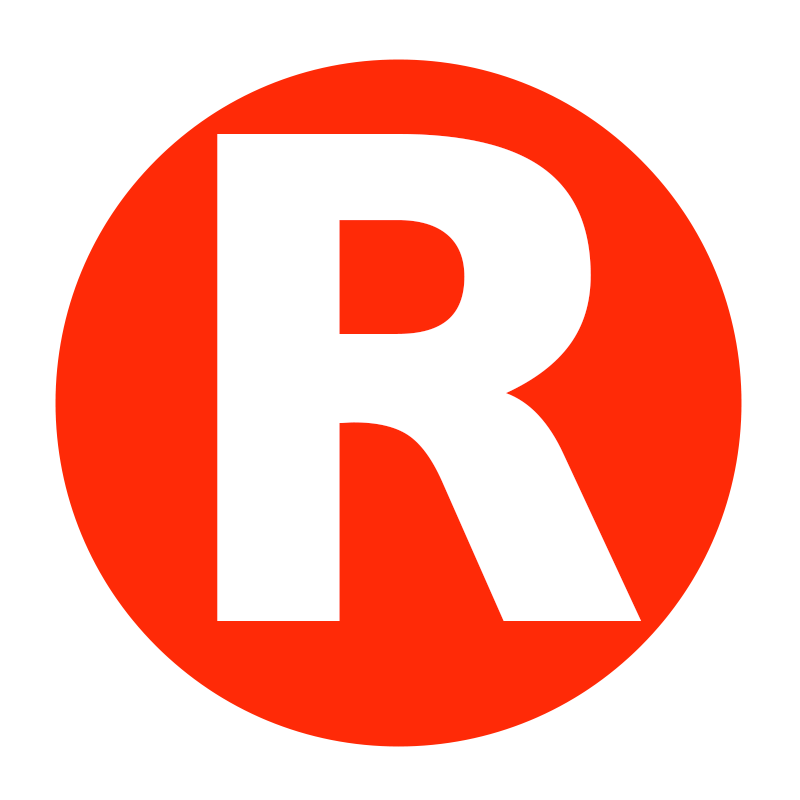
<style>
.page{position:relative;width:800px;height:800px;background:#ffffff}
.page>*{position:absolute;margin:0}
.t1{font:712.8px "Humanist521BT-Bold";color:#ffffff}
</style>
<div class="page">
<p class="t1" style="left:217px;top:134px;width:425px;height:487px">R</p>
</div>
